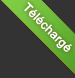
<style>
.page{position:relative;width:75px;height:78px;background:#333333}
.page>*{position:absolute;margin:0}
.t1{font:12px "ArialMT";color:#ffffff;font-weight:bold}
</style>
<div class="page">
<p class="t1" style="left:24px;top:2px;width:48px;height:50px;rotate:45deg">Téléchargé</p>
</div>
